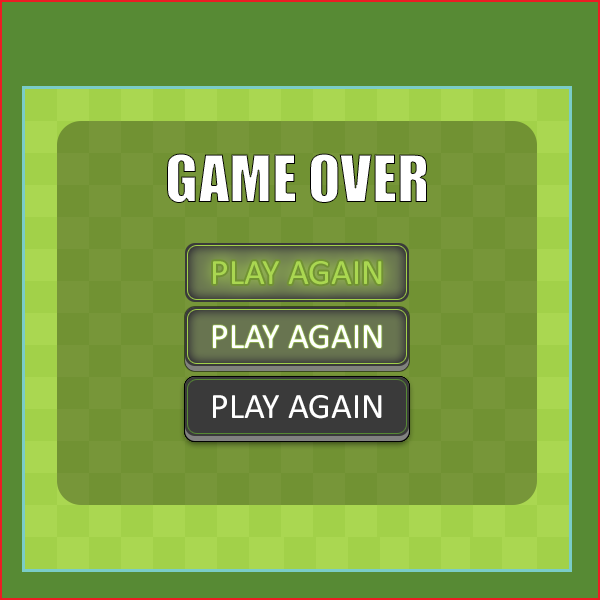
<style>
.page{position:relative;width:600px;height:600px;background:#578a34}
.page>*{position:absolute;margin:0}
.t1{font:60px "Impact";color:#ffffff}
.t2{font:36px "Calibri";color:#aad751}
.t3{font:36px "Calibri";color:#ffffff}
</style>
<div class="page">
<p class="t1" style="left:167px;top:153px;width:260px;height:50px">GAME OVER</p>
<p class="t2" style="left:213px;top:261px;width:169px;height:24px">PLAY AGAIN</p>
<p class="t3" style="left:213px;top:325px;width:169px;height:24px">PLAY AGAIN</p>
<p class="t3" style="left:213px;top:395px;width:169px;height:24px">PLAY AGAIN</p>
</div>
